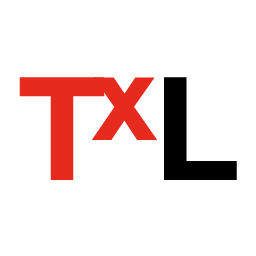
<style>
.page{position:relative;width:256px;height:256px;background:#ffffff}
.page>*{position:absolute;margin:0}
.t1{font:144px "HelveticaNeue-Bold";color:#e62b1e}
.t2{font:121px "HelveticaNeue-Bold";color:#e62b1e}
.t3{font:144px "HelveticaNeue-Bold";color:#000000}
</style>
<div class="page">
<p class="t1" style="left:19px;top:77px;width:218px;height:103px">T<span class="t2">x</span><span class="t3">L</span></p>
</div>
